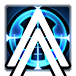
<style>
.page{position:relative;width:76px;height:76px;background:#ffffff}
.page>*{position:absolute;margin:0}
.t1{font:154px "SegoeUI-Light";color:#ffffff}
</style>
<div class="page">
<p class="t1" style="left:7px;top:9px;width:62px;height:57px">^</p>
</div>
